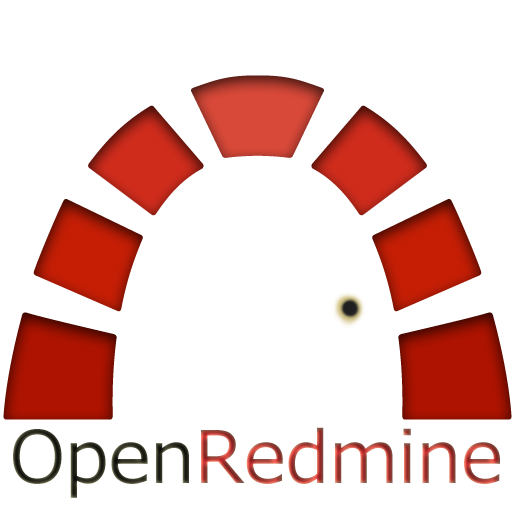
<style>
.page{position:relative;width:512px;height:512px;background:#ffffff}
.page>*{position:absolute;margin:0}
.t1{font:72px "MeiryoUI"}
</style>
<div class="page">
<p class="t1" style="left:13px;top:427px;width:487px;height:71px">OpenRedmine</p>
</div>
